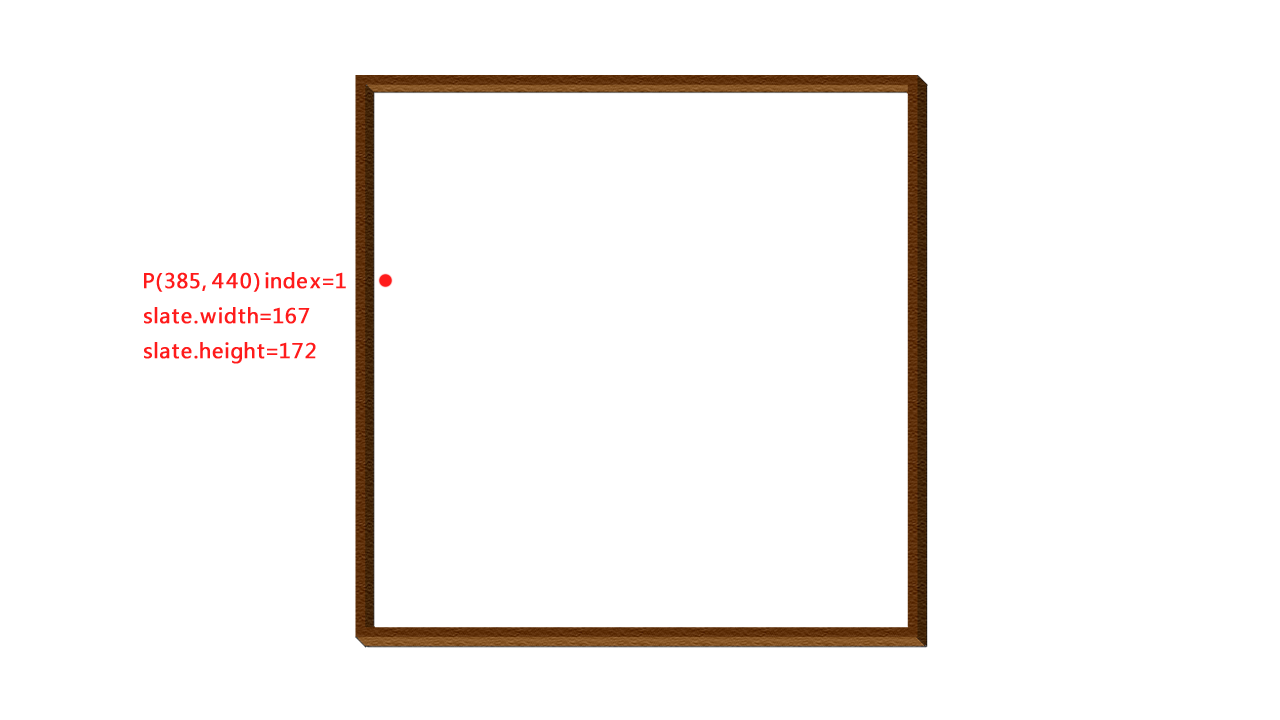
<style>
.page{position:relative;width:1280px;height:720px;background:#ffffff}
.page>*{position:absolute;margin:0}
.t1{font:19.1px "MicrosoftYaHei";letter-spacing:0.14em;color:#ff1b1b;font-weight:bold}
</style>
<div class="page">
<p class="t1" style="left:144px;top:272px;width:202px;height:92px">P(385, 440) index=1<br>slate.width=167<br>slate.height=172</p>
</div>
